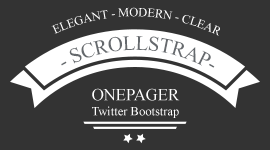
<style>
.page{position:relative;width:270px;height:150px;background:#333333}
.page>*{position:absolute;margin:0}
.t1{font:12.5px "TimesNewRomanPSMT";color:#ffffff}
.t2{font:20.8px "TimesNewRomanPSMT";color:#65696d}
.t3{font:16.7px "TimesNewRomanPSMT";color:#ffffff}
</style>
<div class="page">
<p class="t1" style="left:51px;top:7px;width:169px;height:29px;text-align:center">ELEGANT - MODERN - CLEAR</p>
<p class="t2" style="left:61px;top:36px;width:154px;height:32px">- SCROLLSTRAP-</p>
<p class="t3" style="left:92px;top:88px;width:88px;height:13px">ONEPAGER</p>
<p class="t1" style="left:92px;top:106px;width:87px;height:12px">Twitter Bootstrap</p>
</div>
